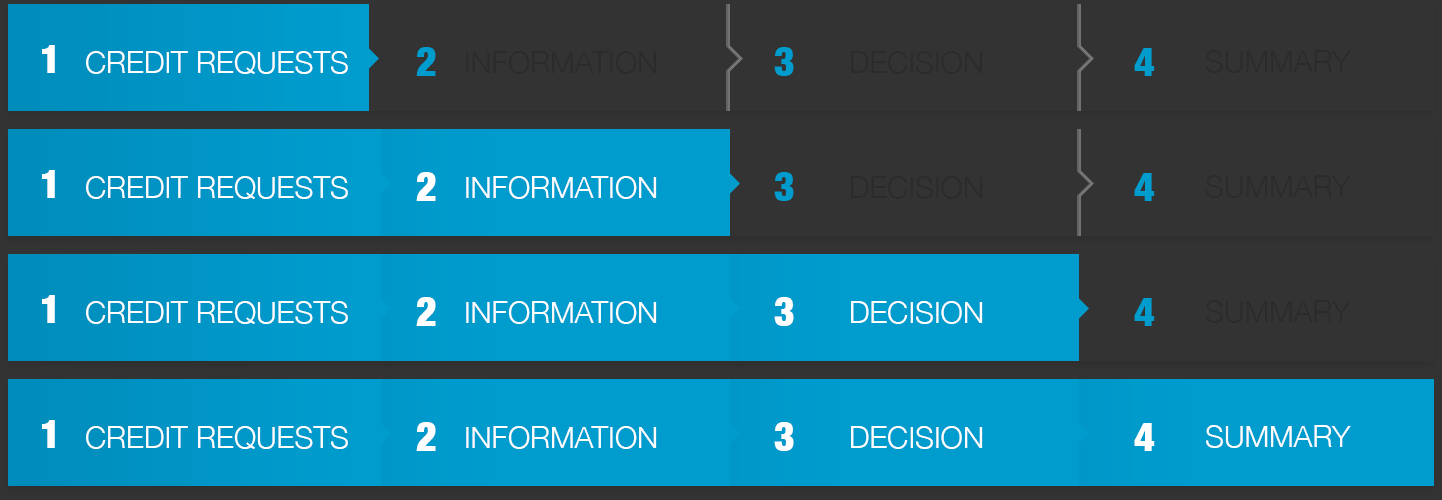
<style>
.page{position:relative;width:1442px;height:500px;background:#333333}
.page>*{position:absolute;margin:0}
.t1{font:40px "HelveticaNeue-CondensedBlack";color:#ffffff}
.t2{font:30px "HelveticaNeue-Light";color:#ffffff;text-transform:uppercase}
.t3{font:40px "HelveticaNeue-CondensedBlack";color:#009cce}
.t4{font:30px "HelveticaNeue-Light";color:#2b2b2b;text-transform:uppercase}
</style>
<div class="page">
<p class="t1" style="left:42px;top:45px;width:13px;height:28px">1</p>
<p class="t2" style="left:86px;top:51px;width:262px;height:23px">Credit REQUESTS</p>
<p class="t3" style="left:416px;top:47px;width:20px;height:29px">2</p>
<p class="t4" style="left:466px;top:51px;width:191px;height:23px">INFORMATION</p>
<p class="t3" style="left:774px;top:47px;width:20px;height:29px">3</p>
<p class="t4" style="left:851px;top:51px;width:132px;height:23px">DECISION</p>
<p class="t3" style="left:1134px;top:48px;width:21px;height:28px">4</p>
<p class="t4" style="left:1206px;top:50px;width:145px;height:23px">SuMMARY</p>
<p class="t1" style="left:42px;top:170px;width:13px;height:28px">1</p>
<p class="t1" style="left:416px;top:172px;width:20px;height:29px">2</p>
<p class="t3" style="left:774px;top:172px;width:20px;height:29px">3</p>
<p class="t3" style="left:1134px;top:173px;width:21px;height:28px">4</p>
<p class="t2" style="left:86px;top:176px;width:262px;height:23px">Credit REQUESTS</p>
<p class="t2" style="left:466px;top:176px;width:191px;height:23px">INFORMATION</p>
<p class="t4" style="left:851px;top:176px;width:132px;height:23px">DECISION</p>
<p class="t4" style="left:1206px;top:175px;width:145px;height:23px">SuMMARY</p>
<p class="t1" style="left:42px;top:295px;width:13px;height:28px">1</p>
<p class="t2" style="left:86px;top:301px;width:262px;height:23px">Credit REQUESTS</p>
<p class="t1" style="left:416px;top:297px;width:20px;height:29px">2</p>
<p class="t2" style="left:466px;top:301px;width:191px;height:23px">INFORMATION</p>
<p class="t1" style="left:774px;top:297px;width:20px;height:29px">3</p>
<p class="t2" style="left:851px;top:301px;width:132px;height:23px">DECISION</p>
<p class="t3" style="left:1134px;top:298px;width:21px;height:28px">4</p>
<p class="t4" style="left:1206px;top:300px;width:145px;height:23px">SuMMARY</p>
<p class="t1" style="left:42px;top:420px;width:13px;height:28px">1</p>
<p class="t1" style="left:416px;top:422px;width:20px;height:29px">2</p>
<p class="t1" style="left:774px;top:422px;width:20px;height:29px">3</p>
<p class="t1" style="left:1134px;top:423px;width:21px;height:28px">4</p>
<p class="t2" style="left:1206px;top:425px;width:145px;height:23px">SuMMARY</p>
<p class="t2" style="left:86px;top:426px;width:262px;height:23px">Credit REQUESTS</p>
<p class="t2" style="left:466px;top:426px;width:191px;height:23px">INFORMATION</p>
<p class="t2" style="left:851px;top:426px;width:132px;height:23px">DECISION</p>
</div>
